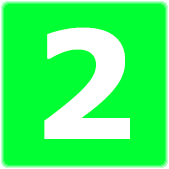
<style>
.page{position:relative;width:169px;height:169px;background:#00ff33}
.page>*{position:absolute;margin:0}
.t1{font:150px "Verdana-Bold";color:#ffffff;text-transform:uppercase}
</style>
<div class="page">
<p class="t1" style="left:44px;top:27px;width:86px;height:112px">2</p>
</div>
